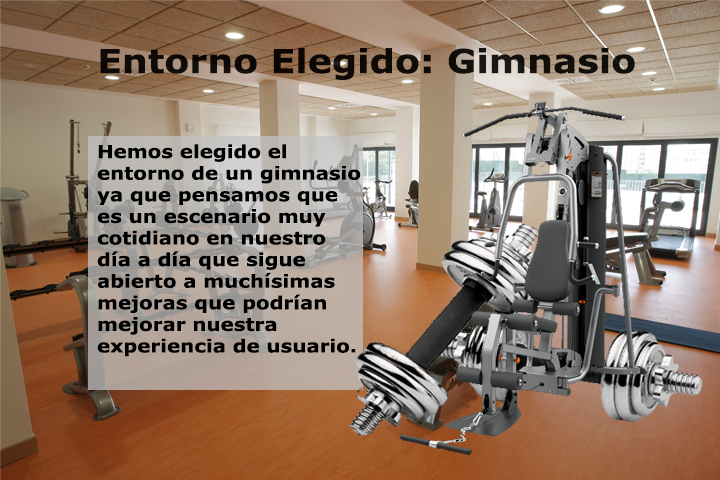
<style>
.page{position:relative;width:720px;height:480px}
.page>*{position:absolute;margin:0}
.t1{font:33px "Verdana-Bold";color:#000000;scale:1.1 1}
.t2{font:18px "Verdana-Bold";color:#000000;scale:1.1 1}
</style>
<div class="page">
<p class="t1" style="left:100px;top:48px;width:535px;height:32px;opacity:0.95">Entorno Elegido: Gimnasio</p>
<p class="t2" style="left:97px;top:144px;width:264px;height:213px">Hemos elegido el entorno de un gimnasio ya que pensamos que es un escenario muy cotidiano en nuestro día a día que sigue abierto a muchísimas mejoras que podrían mejorar nuestra experiencia de usuario.</p>
</div>
